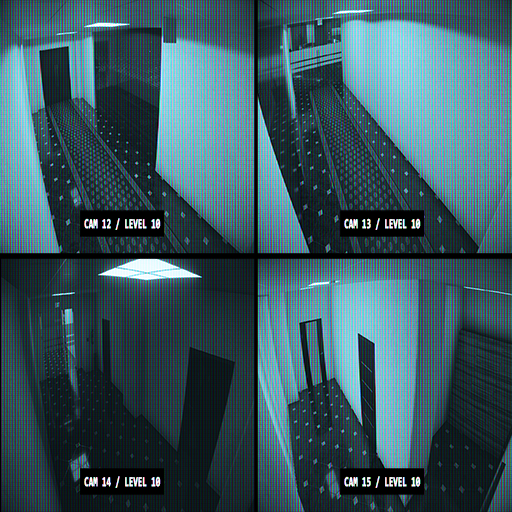
<style>
.page{position:relative;width:512px;height:512px}
.page>*{position:absolute;margin:0}
.t1{font:13.7px "Consolas-Bold";color:#ffffff;font-weight:bold;scale:0.56 1}
</style>
<div class="page">
<p class="t1" style="left:84px;top:218px;width:77px;height:12px">CAM 12 / LEVEL 10</p>
<p class="t1" style="left:344px;top:218px;width:77px;height:12px">CAM 13 / LEVEL 10</p>
<p class="t1" style="left:84px;top:476px;width:77px;height:12px">CAM 14 / LEVEL 10</p>
<p class="t1" style="left:344px;top:476px;width:77px;height:12px">CAM 15 / LEVEL 10</p>
</div>
